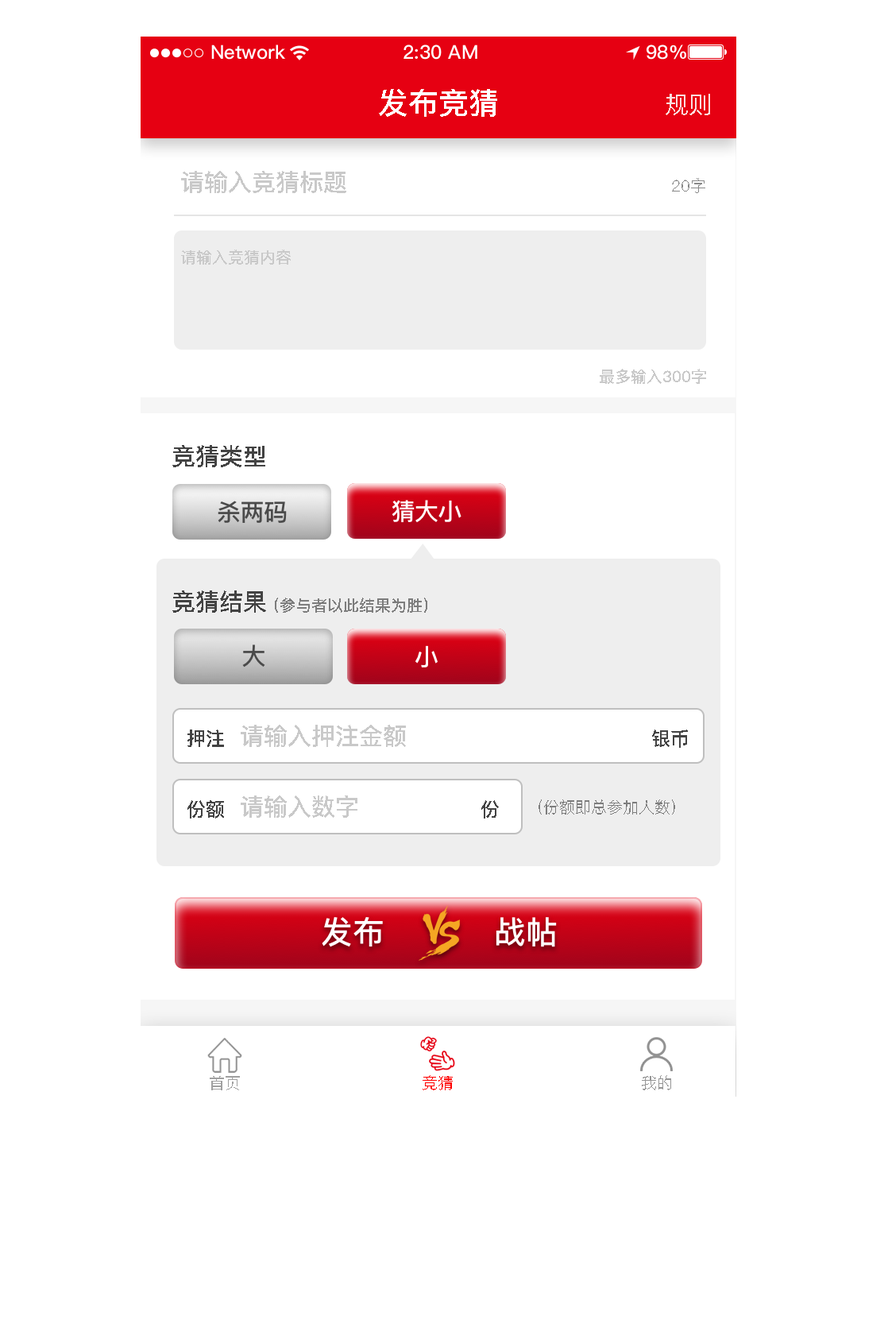
<style>
.page{position:relative;width:888px;height:1343px;background:#ffffff}
.page>*{position:absolute;margin:0}
.t1{font:30.2px "PingFangSC-Medium";color:#ffffff;text-transform:uppercase}
.t2{font:23.8px "PingFangSC-Regular";color:#faddde;text-transform:uppercase}
.t3{font:23.8px "PingFangSC-Medium";color:#c9c9c9;text-transform:uppercase}
.t4{font:15.9px "PingFangSC-Regular";color:#898989;text-transform:uppercase}
.t5{font:15.9px "PingFangSC-Medium";color:#c9c9c9;text-transform:uppercase}
.t6{font:23.8px "PingFangSC-Medium";color:#434343;text-transform:uppercase}
.t7{font:15.9px "PingFangSC-Medium";color:#7d7d7d;text-transform:uppercase}
.t8{font:19.1px "PingFangSC-Medium";color:#434343;text-transform:uppercase}
.t9{font:15.9px "PingFangSC-Regular";color:#7d7d7d;text-transform:uppercase}
.t10{font:15.9px "PingFangSC-Regular";color:#a0a0a0;text-transform:uppercase}
.t11{font:15.9px "PingFangSC-Regular";color:#ff0000;text-transform:uppercase}
.t12{font:15.9px "PingFangSC-Regular";color:#959595;text-transform:uppercase}
</style>
<div class="page">
<p class="t1" style="left:379px;top:89px;width:118px;height:28px">发布竞猜</p>
<p class="t2" style="left:666px;top:94px;width:44px;height:21px">规则</p>
<p class="t3" style="left:181px;top:171px;width:165px;height:22px">请输入竞猜标题</p>
<p class="t4" style="left:672px;top:178px;width:33px;height:15px">20字</p>
<p class="t5" style="left:181px;top:249px;width:110px;height:16px">请输入竞猜内容</p>
<p class="t5" style="left:600px;top:369px;width:106px;height:15px">最多输入300字</p>
<p class="t6" style="left:172px;top:445px;width:93px;height:22px">竞猜类型</p>
<p class="t6" style="left:172px;top:590px;width:94px;height:23px">竞猜结果</p>
<p class="t7" style="left:275px;top:597px;width:152px;height:16px">（参与者以此结果为胜）</p>
<p class="t3" style="left:241px;top:725px;width:165px;height:22px">请输入押注金额</p>
<p class="t8" style="left:187px;top:729px;width:37px;height:18px">押注</p>
<p class="t8" style="left:652px;top:729px;width:36px;height:19px">银币</p>
<p class="t3" style="left:241px;top:795px;width:116px;height:22px">请输入数字</p>
<p class="t8" style="left:187px;top:800px;width:37px;height:18px">份额</p>
<p class="t8" style="left:481px;top:800px;width:18px;height:18px">份</p>
<p class="t9" style="left:539px;top:799px;width:136px;height:15px">（份额即总参加人数）</p>
<p class="t10" style="left:210px;top:1076px;width:30px;height:14px">首页</p>
<p class="t11" style="left:423px;top:1075px;width:30px;height:15px">竞猜</p>
<p class="t12" style="left:642px;top:1075px;width:29px;height:15px">我的</p>
</div>
